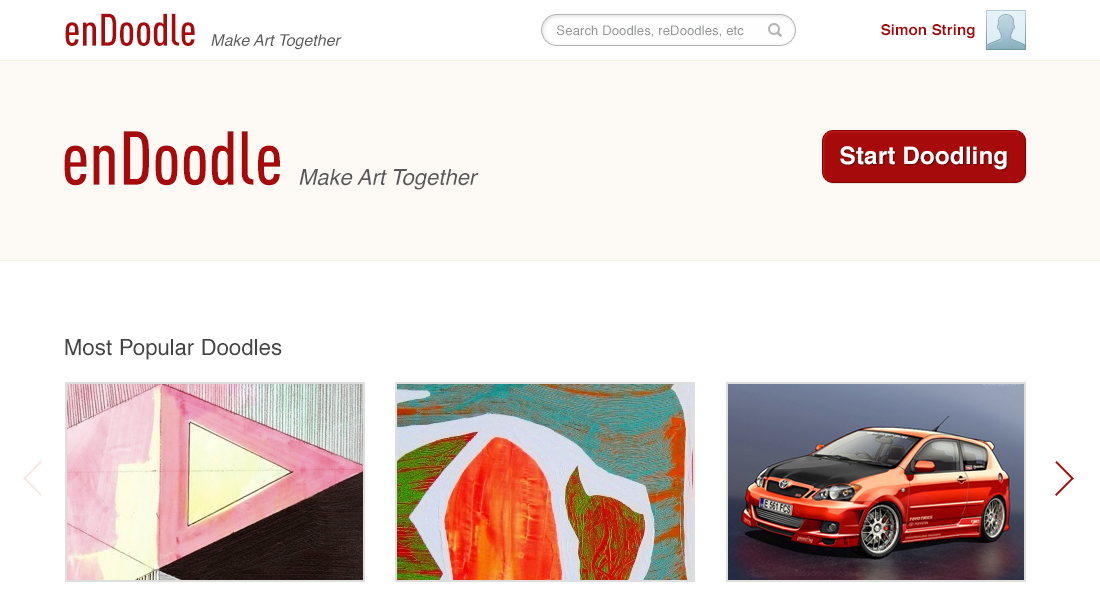
<style>
.page{position:relative;width:1100px;height:602px;background:#ffffff}
.page>*{position:absolute;margin:0}
.t1{font:45px "DINCond-Medium";color:#a60a0a}
.t2{font:13px "Helvetica";letter-spacing:0.01em;color:#969798}
.t3{font:15px "Helvetica-Bold";letter-spacing:0.01em;color:#a60a0a}
.t4{font:16px "Helvetica-Oblique";color:#59595b}
.t5{font:75px "DINCond-Medium";color:#a60a0a}
.t6{font:24px "Helvetica-Bold";letter-spacing:0.01em;color:#ffffff}
.t7{font:22px "Helvetica-Oblique";color:#59595b}
.t8{font:22px "Helvetica";letter-spacing:0.01em;color:#444444}
</style>
<div class="page">
<p class="t1" style="left:65px;top:13px;width:130px;height:33px">enDoodle</p>
<p class="t2" style="left:557px;top:25px;width:187px;height:12px">Search Doodles, reDoodles, etc</p>
<p class="t3" style="left:881px;top:24px;width:94px;height:15px">Simon String</p>
<p class="t4" style="left:211px;top:34px;width:131px;height:16px">Make Art Together</p>
<p class="t5" style="left:64px;top:131px;width:216px;height:55px">enDoodle</p>
<p class="t6" style="left:840px;top:146px;width:167px;height:24px">Start Doodling</p>
<p class="t7" style="left:299px;top:169px;width:180px;height:21px">Make Art Together</p>
<p class="t8" style="left:65px;top:339px;width:217px;height:21px">Most Popular Doodles</p>
</div>
